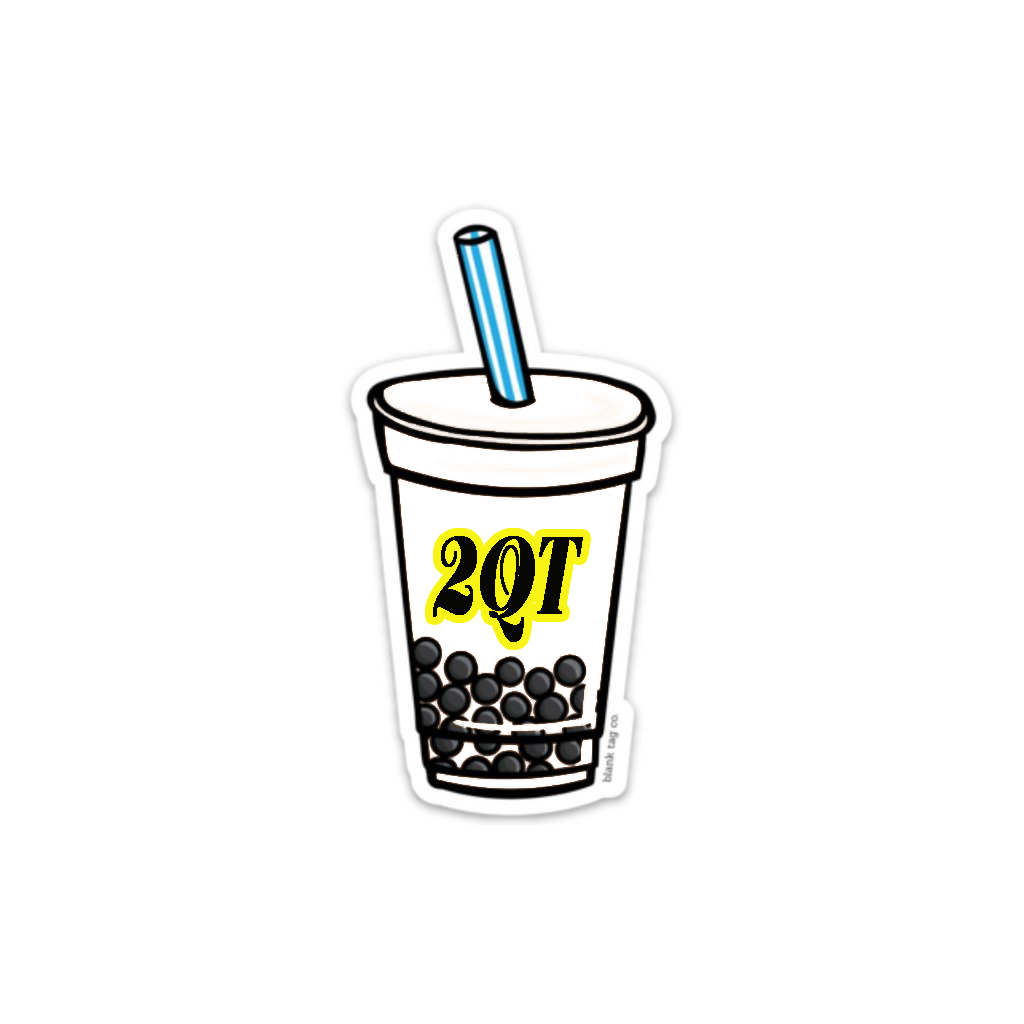
<style>
.page{position:relative;width:1024px;height:1024px;background:#ffffff}
.page>*{position:absolute;margin:0}
.t1{font:129.3px "HLTAparo";color:#070706;font-weight:bold;scale:0.61 1}
</style>
<div class="page">
<p class="t1" style="left:433px;top:536px;width:150px;height:106px">2QT</p>
</div>
